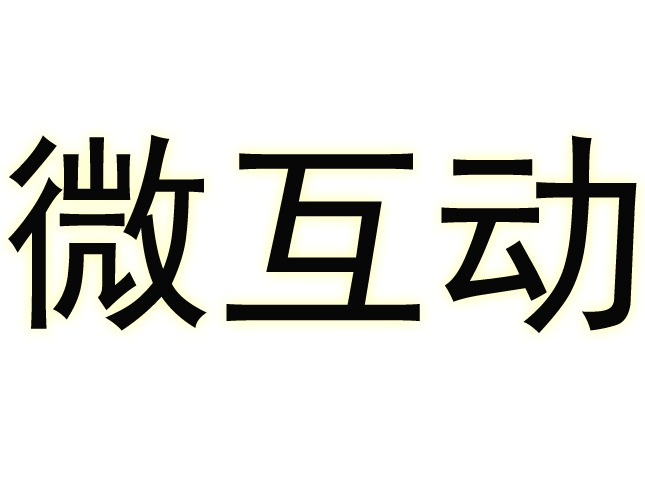
<style>
.page{position:relative;width:645px;height:485px;background:#ffffff}
.page>*{position:absolute;margin:0}
.t1{font:216.7px "SimHei";color:#070707}
</style>
<div class="page">
<p class="t1" style="left:8px;top:134px;width:629px;height:199px">微互动</p>
</div>
